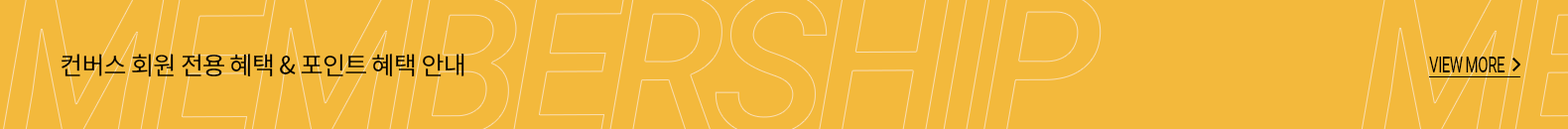
<style>
.page{position:relative;width:1568px;height:129px;background:#f3b93c}
.page>*{position:absolute;margin:0}
.t1{font:24.8px "NotoSansCJKkr-Regular";letter-spacing:-0.025em;color:#000000;text-transform:uppercase}
.t2{font:21.8px "Roboto-Regular";letter-spacing:-0.075em;color:#000000;text-transform:uppercase;scale:0.7 1}
</style>
<div class="page">
<p class="t1" style="left:61px;top:54px;width:403px;height:23px">컨버스 회원 전용 혜택 &amp; 포인트 혜택 안내</p>
<p class="t2" style="left:1429px;top:57px;width:76px;height:15px">view more</p>
</div>
